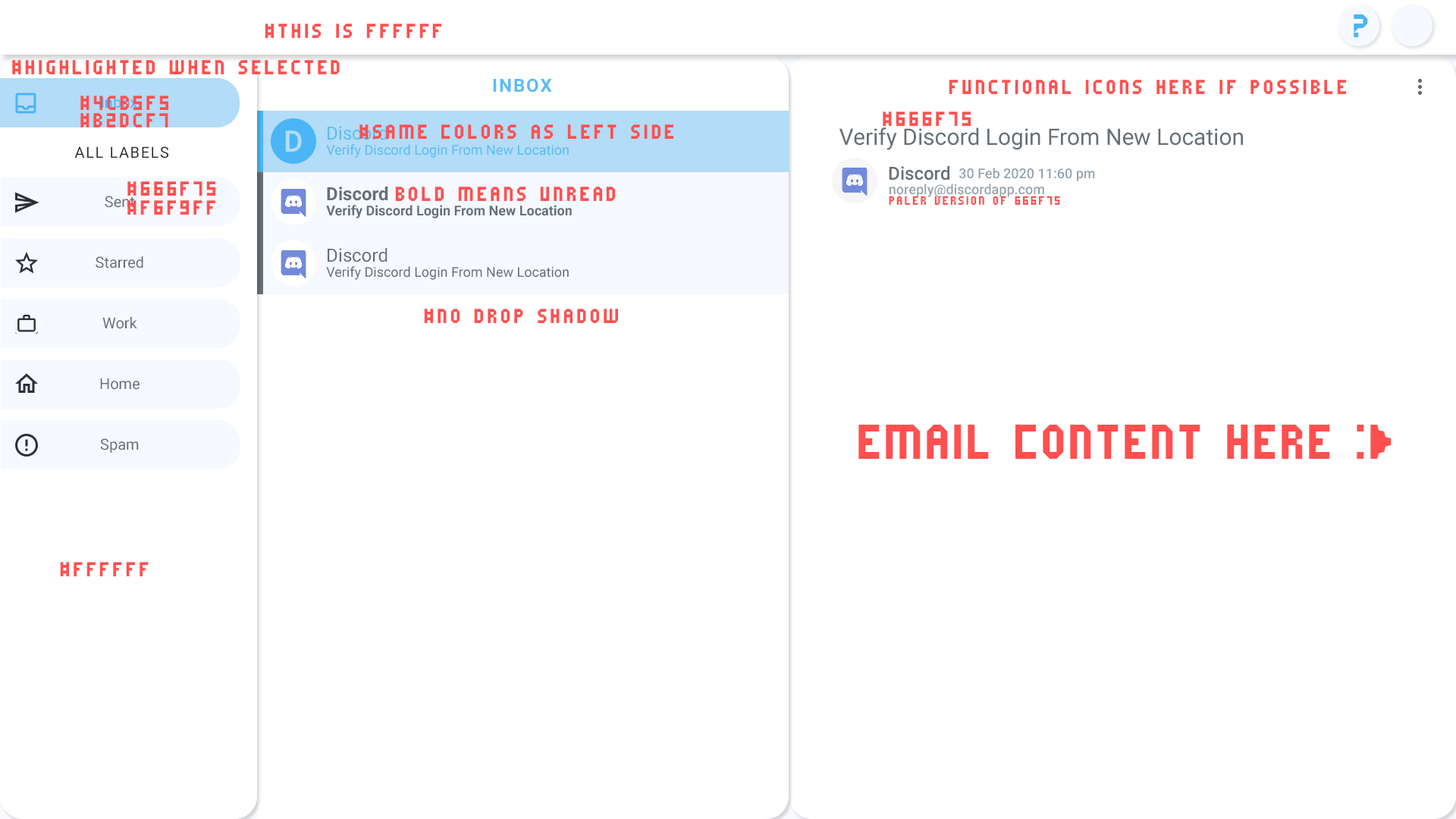
<style>
.page{position:relative;width:1456px;height:819px;background:#ffffff}
.page>*{position:absolute;margin:0}
.t1{font:36.4px "Fruitymicrofont";color:#4cb5f5}
.t2{font:22.7px "Fruitymicrofont";letter-spacing:0.08em;color:#ff5050}
.t3{font:18.2px "Roboto-Bold";letter-spacing:0.08em;color:#5cbbf5}
.t4{font:15.2px "Roboto-Regular";color:#4cb5f5}
.t5{font:18.2px "Roboto-Regular";color:#5cbbf5}
.t6{font:29.7px "Roboto-Medium";letter-spacing:0.024em;color:#b2dcf7}
.t7{font:22.7px "Roboto-Regular";color:#666f75}
.t8{font:15.2px "Roboto-Regular";letter-spacing:0.08em;color:#23272a}
.t9{font:13.6px "Roboto-Regular";color:#5cbbf5}
.t10{font:18.2px "Roboto-Medium";color:#666f75}
.t11{font:13.6px "Roboto-Medium";color:#97a4ad}
.t12{font:15.2px "Roboto-Regular";color:#666f75}
.t13{font:18.2px "Roboto-Bold";color:#666f75}
.t14{font:13.6px "Fruitymicrofont";letter-spacing:0.08em;color:#ff5050}
.t15{font:13.6px "Roboto-Bold";color:#666f75}
.t16{font:18.2px "Roboto-Regular";color:#666f75}
.t17{font:13.6px "Roboto-Regular";color:#666f75}
.t18{font:54.6px "Fruitymicrofont";color:#ff5050}
</style>
<div class="page">
<p class="t1" style="left:1354px;top:14px;width:14px;height:23px">?</p>
<p class="t2" style="left:265px;top:24px;width:176px;height:14px">#this is FFFFFF</p>
<p class="t2" style="left:12px;top:60px;width:328px;height:14px">#Highlighted when selected</p>
<p class="t3" style="left:493px;top:78px;width:59px;height:15px">INBOX</p>
<p class="t2" style="left:949px;top:80px;width:397px;height:14px">Functional icons here if possible</p>
<p class="t2" style="left:80px;top:96px;width:88px;height:14px">#4cb5f5</p>
<p class="t4" style="left:102px;top:96px;width:35px;height:12px">Inbox</p>
<p class="t2" style="left:80px;top:113px;width:88px;height:14px">#b2dcf7</p>
<p class="t2" style="left:883px;top:111px;width:88px;height:15px">#666f75</p>
<p class="t5" style="left:328px;top:126px;width:60px;height:14px">Discord</p>
<p class="t2" style="left:359px;top:124px;width:314px;height:15px">#SAME COLORs as left side</p>
<p class="t6" style="left:285px;top:130px;width:17px;height:22px">D</p>
<p class="t7" style="left:839px;top:127px;width:404px;height:23px">Verify Discord Login From New Location</p>
<p class="t8" style="left:74px;top:146px;width:94px;height:12px">ALL LABELS</p>
<p class="t9" style="left:326px;top:144px;width:243px;height:14px">Verify Discord Login From New Location</p>
<p class="t10" style="left:889px;top:166px;width:60px;height:14px">Discord</p>
<p class="t11" style="left:959px;top:168px;width:136px;height:13px">30 Feb 2020 11:60 pm</p>
<p class="t2" style="left:127px;top:181px;width:88px;height:15px">#666f75</p>
<p class="t11" style="left:889px;top:184px;width:155px;height:13px">noreply@discordapp.com</p>
<p class="t12" style="left:105px;top:196px;width:29px;height:12px">Sent</p>
<p class="t13" style="left:327px;top:187px;width:61px;height:14px">Discord</p>
<p class="t2" style="left:395px;top:187px;width:220px;height:14px">BOLD Means Unread</p>
<p class="t14" style="left:889px;top:196px;width:171px;height:9px">Paler version of 666f75</p>
<p class="t2" style="left:127px;top:200px;width:88px;height:15px">#f6f9ff</p>
<p class="t15" style="left:326px;top:205px;width:246px;height:13px">Verify Discord Login From New Location</p>
<p class="t12" style="left:96px;top:256px;width:47px;height:12px">Starred</p>
<p class="t16" style="left:328px;top:248px;width:60px;height:14px">Discord</p>
<p class="t17" style="left:326px;top:266px;width:243px;height:14px">Verify Discord Login From New Location</p>
<p class="t12" style="left:102px;top:317px;width:35px;height:12px">Work</p>
<p class="t2" style="left:424px;top:309px;width:194px;height:14px">#NO Drop Shadow</p>
<p class="t12" style="left:100px;top:378px;width:40px;height:12px">Home</p>
<p class="t18" style="left:858px;top:425px;width:534px;height:34px">EMAIL CONTENT HERE :&gt;</p>
<p class="t12" style="left:100px;top:438px;width:39px;height:15px">Spam</p>
<p class="t2" style="left:60px;top:562px;width:89px;height:14px">#FFFFFF</p>
</div>
